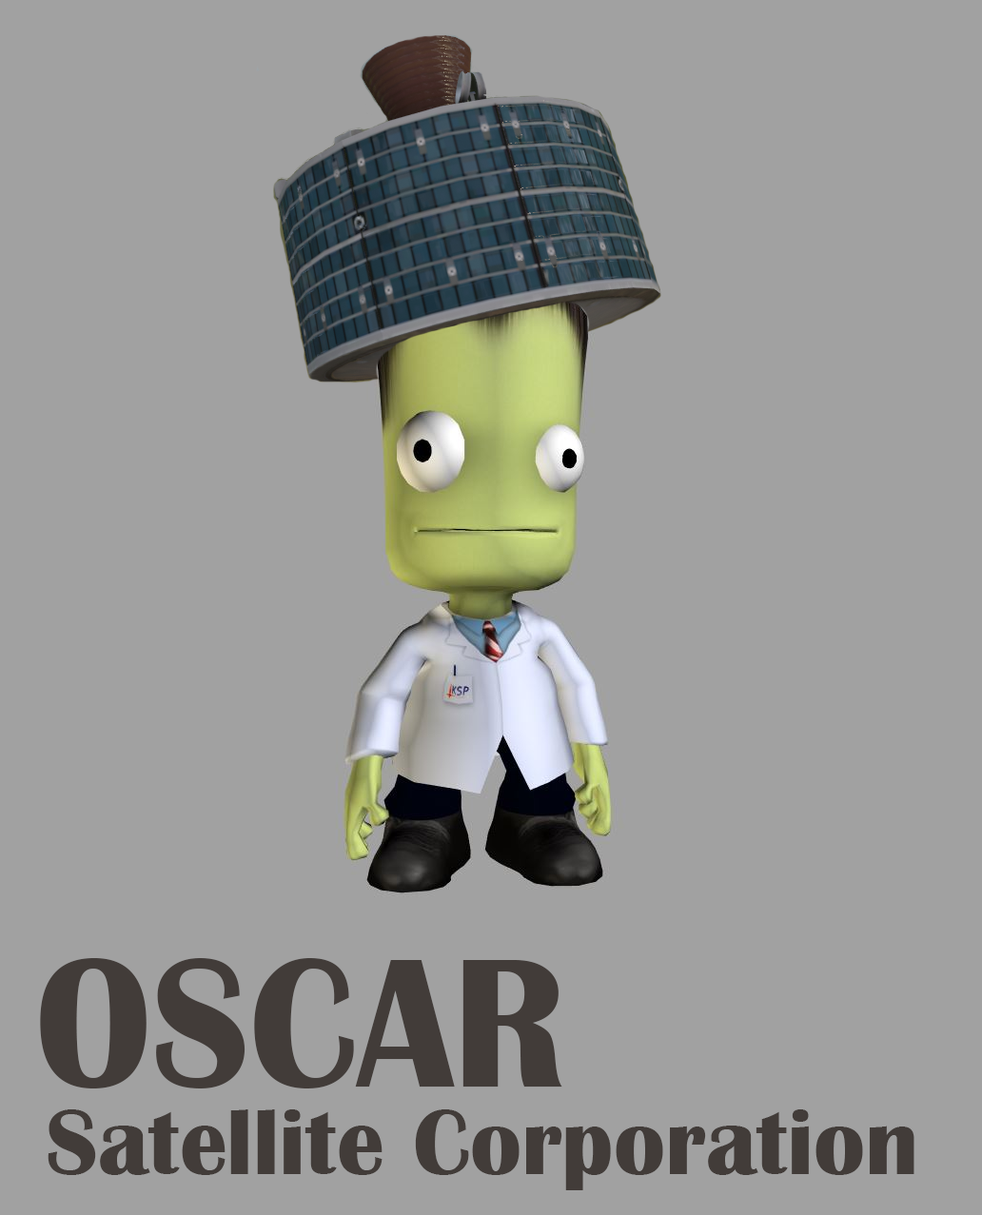
<style>
.page{position:relative;width:982px;height:1215px;background:#a1a1a1}
.page>*{position:absolute;margin:0}
.t1{font:189.5px "BritannicBold";color:#423c39;scale:0.94 1}
.t2{font:95.1px "BritannicBold";color:#423c39}
</style>
<div class="page">
<p class="t1" style="left:40px;top:958px;width:522px;height:130px">OSCAR</p>
<p class="t2" style="left:48px;top:1109px;width:866px;height:81px">Satellite Corporation</p>
</div>
